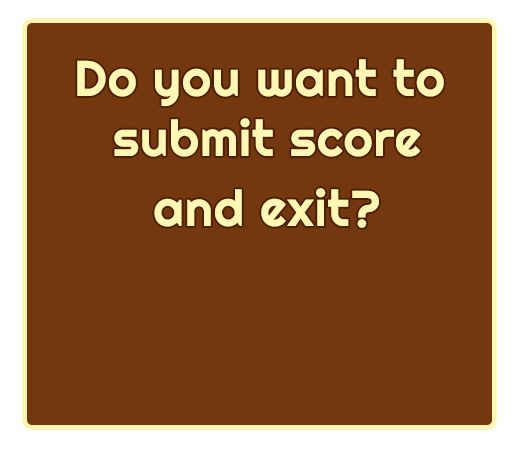
<style>
.page{position:relative;width:515px;height:450px;background:#74380f}
.page>*{position:absolute;margin:0}
.t1{font:50px/10px "Righteous-Regular";letter-spacing:0.02em;color:#fff7b3}
</style>
<div class="page">
<p class="t1" style="left:77px;top:59px;width:367px;height:169px;text-align:center">Do you want to <br><br><br><br><br><br>submit score<br><br><br><br><br><br><br>and exit?</p>
</div>
